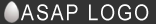
<style>
.page{position:relative;width:156px;height:24px;background:#333333}
.page>*{position:absolute;margin:0}
.t1{font:21.9px "ArialMT";letter-spacing:0.09em;color:#ffffff;scale:0.89 1}
</style>
<div class="page">
<p class="t1" style="left:21px;top:4px;width:128px;height:17px">ASAP LOGO</p>
</div>
